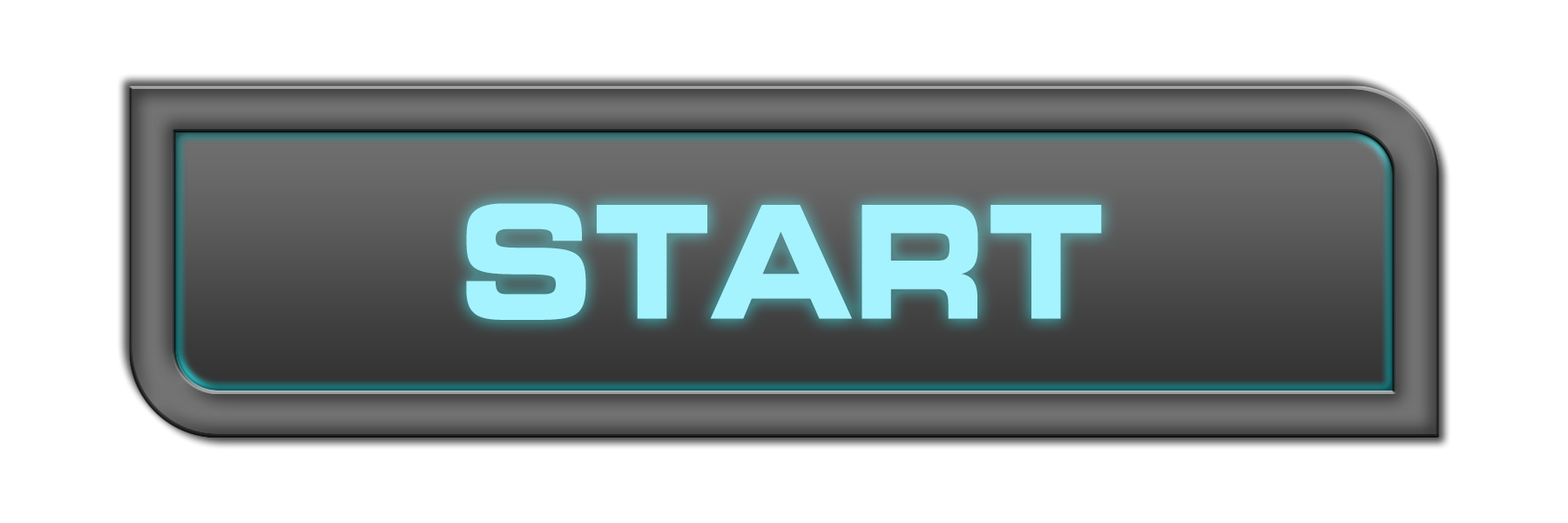
<style>
.page{position:relative;width:1568px;height:523px;background:#ffffff}
.page>*{position:absolute;margin:0}
.t1{font:156.8px "EurostileLTStd-BoldEx2";color:#a5f3ff;scale:0.83 1}
</style>
<div class="page">
<p class="t1" style="left:466px;top:203px;width:636px;height:117px">START</p>
</div>
